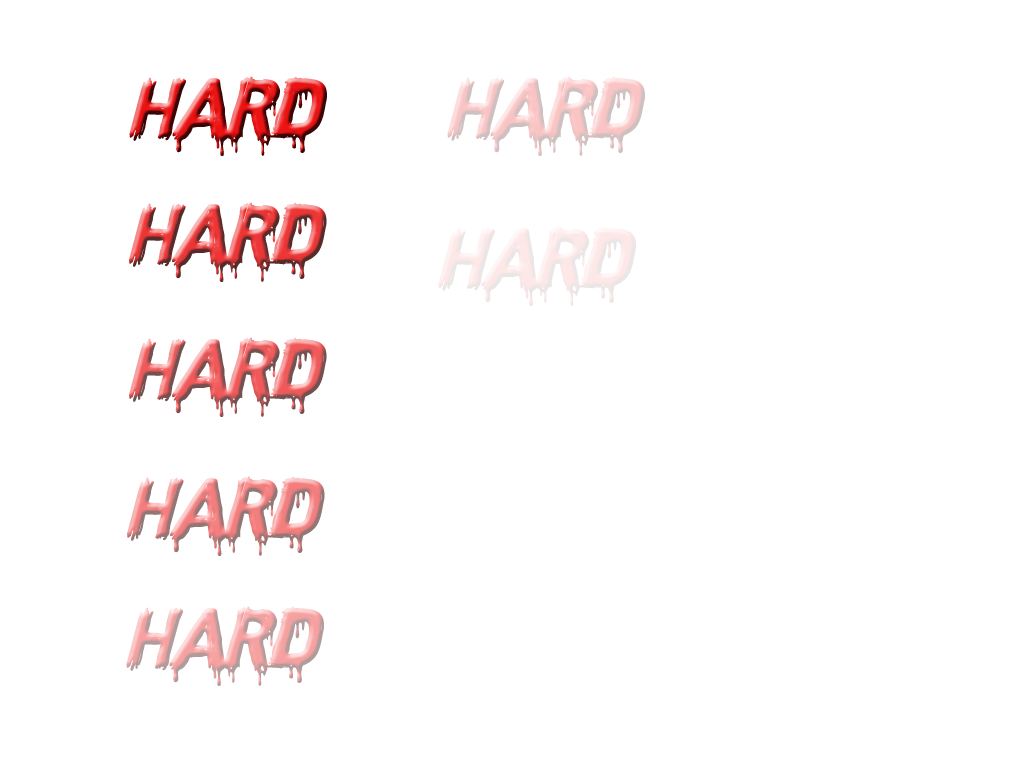
<style>
.page{position:relative;width:1024px;height:768px;background:#ffffff}
.page>*{position:absolute;margin:0}
.t1{font:80px "CFNightofTerrorPERSONAL-Reg"}
.t2{font:80px "CFNightofTerrorPERSONAL-Reg";color:#fde7e7}
</style>
<div class="page">
<p class="t1" style="left:129px;top:76px;width:198px;height:80px">Hard</p>
<p class="t1" style="left:447px;top:76px;width:198px;height:80px">Hard</p>
<p class="t1" style="left:129px;top:202px;width:198px;height:80px">Hard</p>
<p class="t2" style="left:438px;top:226px;width:198px;height:80px">Hard</p>
<p class="t1" style="left:129px;top:337px;width:198px;height:80px">Hard</p>
<p class="t1" style="left:127px;top:476px;width:198px;height:80px">Hard</p>
<p class="t1" style="left:126px;top:606px;width:198px;height:80px">Hard</p>
</div>
